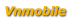
<style>
.page{position:relative;width:70px;height:24px;background:#ffffff}
.page>*{position:absolute;margin:0}
.t1{font:12px "Verdana-BoldItalic";letter-spacing:-0.02em;color:#f8b708}
</style>
<div class="page">
<p class="t1" style="left:5px;top:6px;width:61px;height:10px">Vnmobile</p>
</div>
